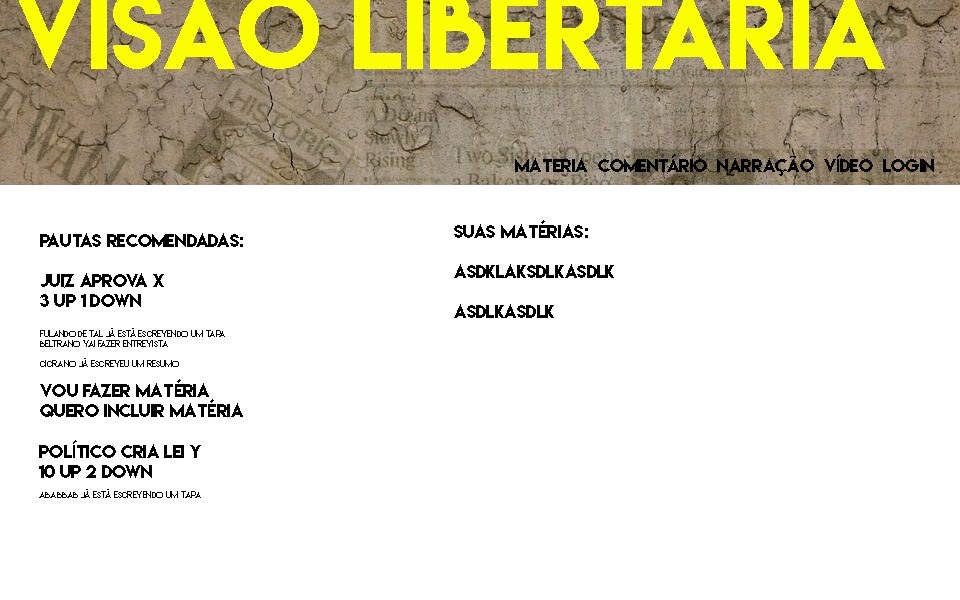
<style>
.page{position:relative;width:960px;height:600px;background:#ffffff}
.page>*{position:absolute;margin:0}
.t1{font:16.7px "LemonMilk";color:#000000}
.t2{font:8.3px "LemonMilk";color:#000000}
</style>
<div class="page">
<p class="t1" style="left:515px;top:154px;width:419px;height:22px">Materia  Comentário  Narração  Vídeo  Login</p>
<p class="t1" style="left:454px;top:220px;width:160px;height:98px">Suas Matérias:<br><br>asdklaksdlkasdlk<br><br>asdlkasdlk</p>
<p class="t2" style="left:40px;top:233px;width:203px;height:184px"><span class="t1">Pautas recomendadas:<br><br>Juiz aprova X<br>3 up 1 down<br><br></span>Fulando de tal já está escrevendo um tapa<br>Beltrano vai fazer entrevista<br><br>Cicrano já escreveu um resumo<br><br><span class="t1">Vou fazer matéria<br>Quero incluir matéria</span></p>
<p class="t2" style="left:39px;top:440px;width:162px;height:58px"><span class="t1">Político cria lei Y<br>10 up 2 down<br></span><br>Ababbab já está escrevendo um tapa</p>
</div>
